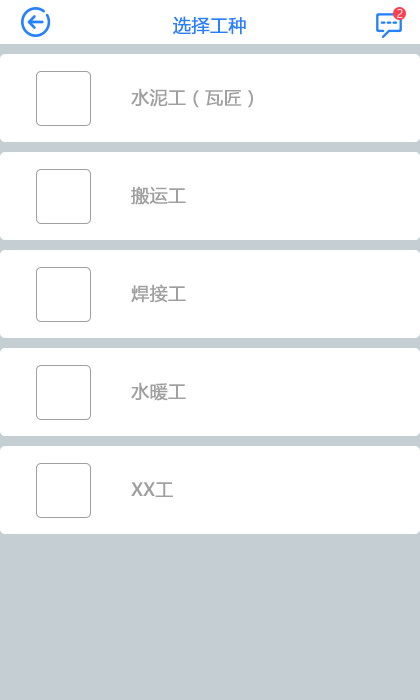
<style>
.page{position:relative;width:420px;height:700px;background:#ffffff}
.page>*{position:absolute;margin:0}
.t1{font:18px "MicrosoftYaHei";color:#2681fc;font-weight:bold}
.t2{font:11px "MicrosoftYaHeiLight";color:#fcf9fa}
.t3{font:18px "MicrosoftYaHei";color:#a0a0a0;font-weight:bold}
</style>
<div class="page">
<p class="t1" style="left:173px;top:16px;width:73px;height:19px">选择工种</p>
<p class="t2" style="left:397px;top:9px;width:6px;height:9px">2</p>
<p class="t3" style="left:131px;top:88px;width:122px;height:20px">水泥工（瓦匠）</p>
<p class="t3" style="left:131px;top:186px;width:55px;height:19px">搬运工</p>
<p class="t3" style="left:131px;top:284px;width:55px;height:19px">焊接工</p>
<p class="t3" style="left:131px;top:382px;width:55px;height:19px">水暖工</p>
<p class="t3" style="left:131px;top:482px;width:42px;height:15px">XX工</p>
</div>
